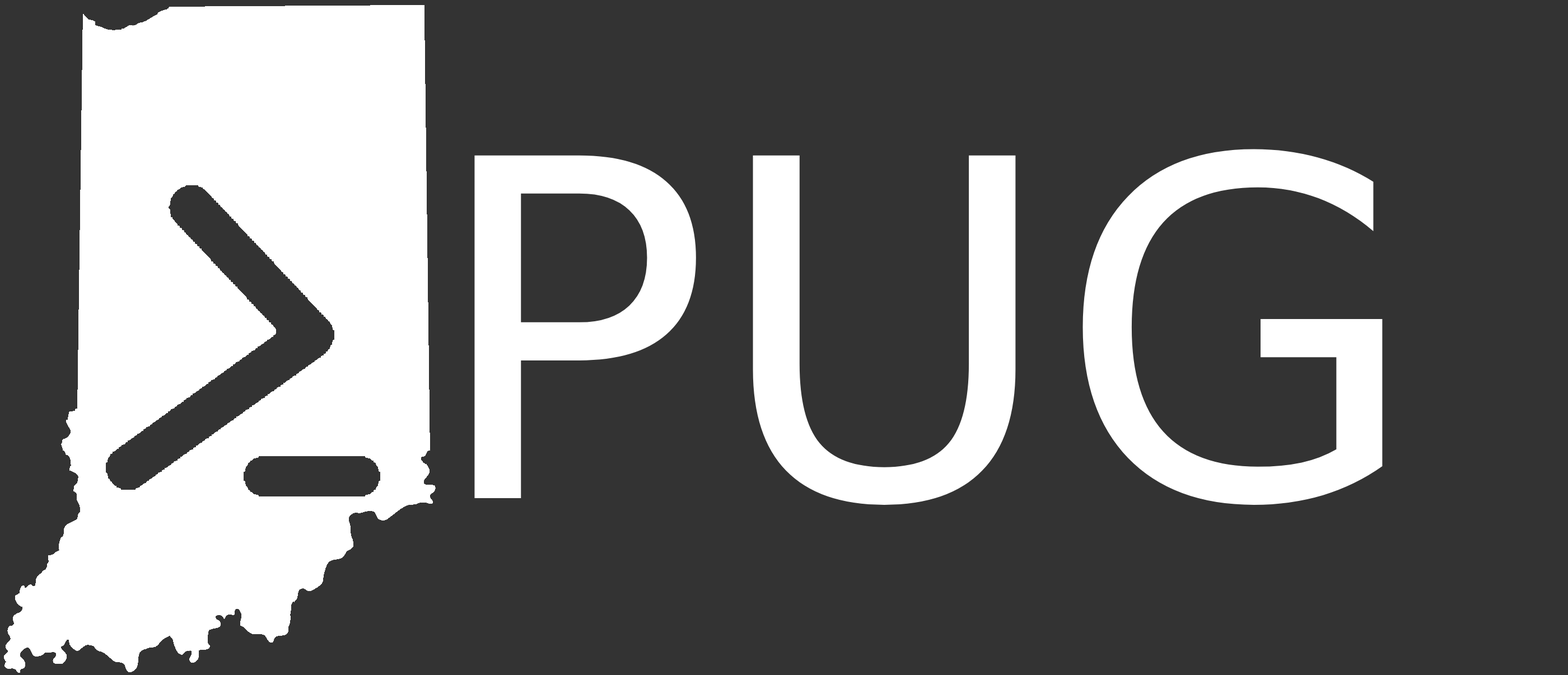
<style>
.page{position:relative;width:1568px;height:675px;background:#333333}
.page>*{position:absolute;margin:0}
.t1{font:470.4px "DejaVuSans";color:#ffffff}
</style>
<div class="page">
<p class="t1" style="left:474px;top:149px;width:909px;height:356px">PUG</p>
</div>
